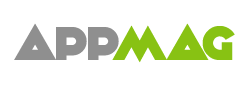
<style>
.page{position:relative;width:250px;height:89px;background:#ffffff}
.page>*{position:absolute;margin:0}
.t1{font:48px "KiloGram";color:#8f8f8f}
.t2{font:48px "KiloGram";color:#88c213}
.t3{font:48px "KiloGram";color:#88c213;text-transform:uppercase}
</style>
<div class="page">
<p class="t1" style="left:14px;top:23px;width:221px;height:40px">app<span class="t2">ma</span><span class="t3">g</span></p>
</div>
